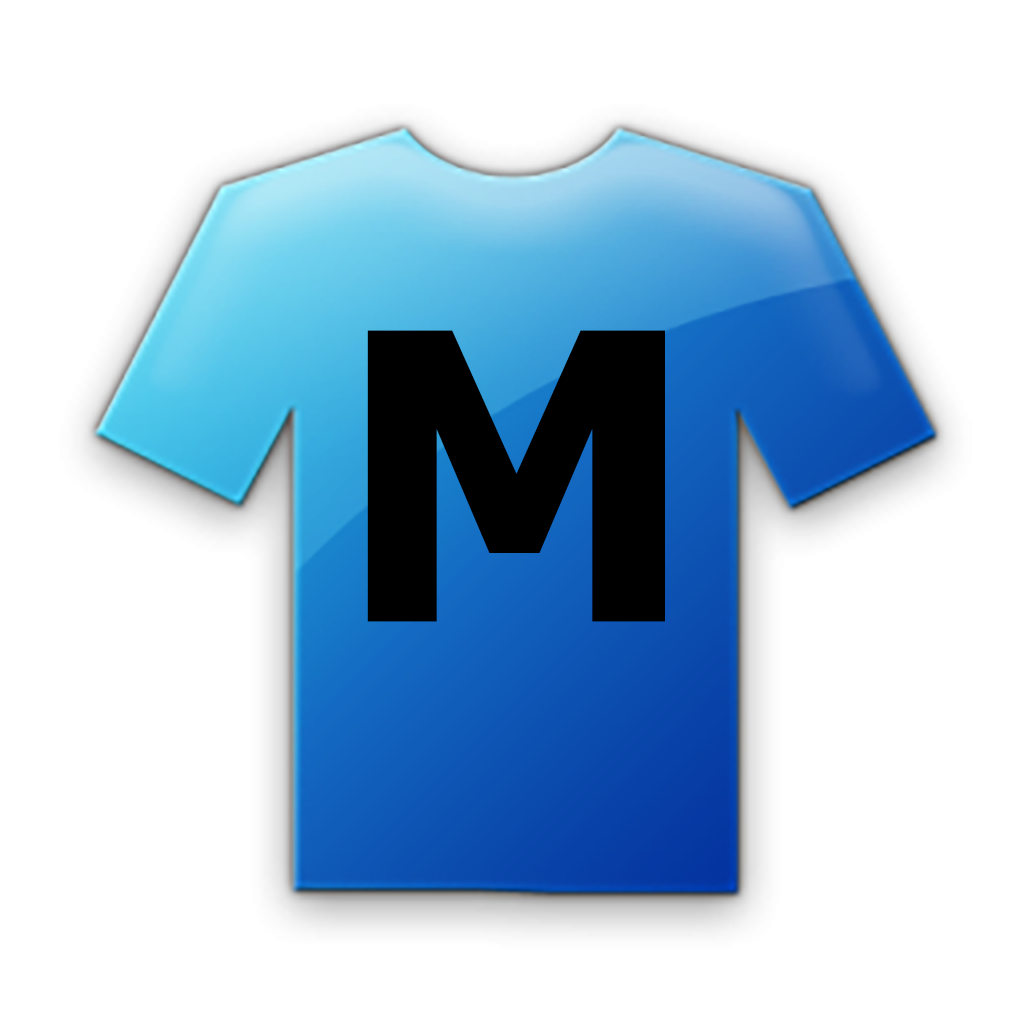
<style>
.page{position:relative;width:1024px;height:1024px;background:#ffffff}
.page>*{position:absolute;margin:0}
.t1{font:400px "Tahoma-Bold";letter-spacing:0.1em;color:#000000}
</style>
<div class="page">
<p class="t1" style="left:367px;top:330px;width:298px;height:292px">M</p>
</div>
